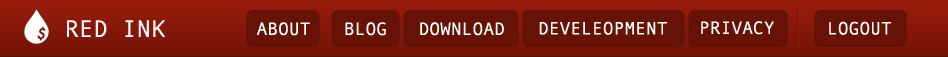
<style>
.page{position:relative;width:948px;height:57px;background:#661207}
.page>*{position:absolute;margin:0}
.t1{font:14px "Futura-Medium";color:#761407;font-style:italic}
.t2{font:24px "AndaleMono";color:#f5f5f5}
.t3{font:18px "AndaleMono";color:#fefffd}
</style>
<div class="page">
<p class="t1" style="left:37px;top:26px;width:9px;height:15px">$</p>
<p class="t2" style="left:67px;top:20px;width:99px;height:17px">RED INK</p>
<p class="t3" style="left:256px;top:22px;width:54px;height:14px">ABOUT</p>
<p class="t3" style="left:345px;top:22px;width:41px;height:14px">BLOG</p>
<p class="t3" style="left:420px;top:22px;width:84px;height:14px">DOWNLOAD</p>
<p class="t3" style="left:539px;top:21px;width:128px;height:14px">DEVELEOPMENT</p>
<p class="t3" style="left:701px;top:21px;width:73px;height:14px">PRIVACY</p>
<p class="t3" style="left:829px;top:21px;width:62px;height:14px">LOGOUT</p>
</div>
